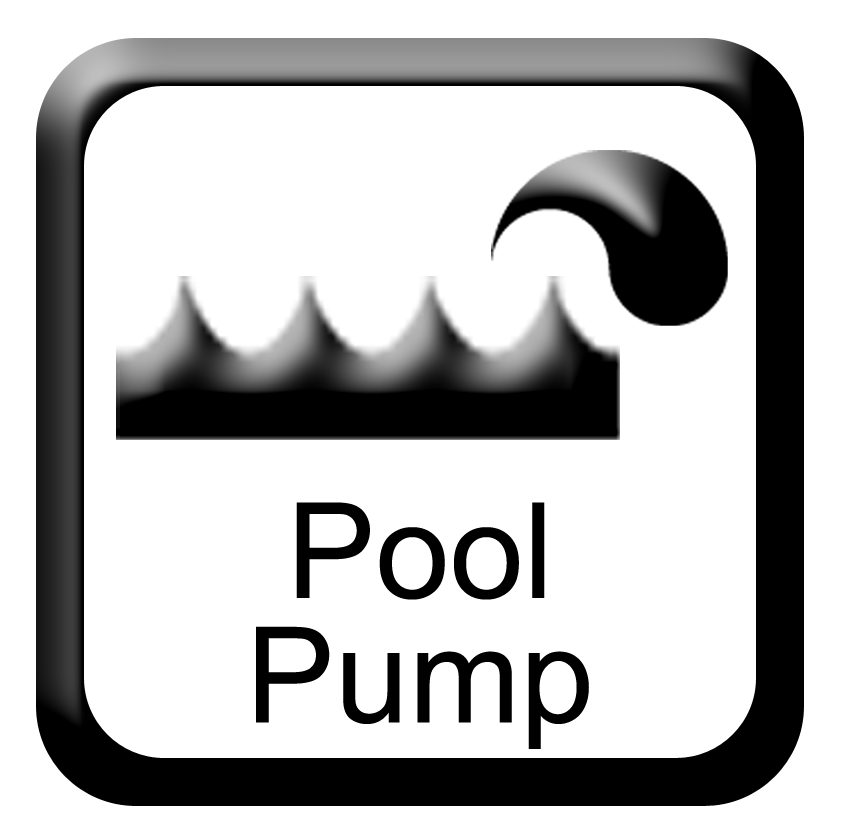
<style>
.page{position:relative;width:844px;height:836px;background:#ffffff}
.page>*{position:absolute;margin:0}
.t1{font:133.3px/124.4px "ArialMT";color:#000000}
</style>
<div class="page">
<p class="t1" style="left:256px;top:502px;width:333px;height:247px;text-align:center">Pool<br>Pump</p>
</div>
